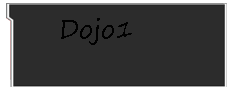
<style>
.page{position:relative;width:228px;height:90px;background:#2c2c2c}
.page>*{position:absolute;margin:0}
.t1{font:25px "SegoePrint";color:#000000}
</style>
<div class="page">
<p class="t1" style="left:61px;top:18px;width:71px;height:27px">Dojo1</p>
</div>
